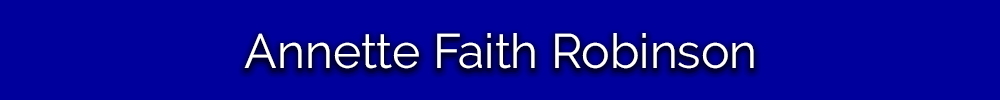
<style>
.page{position:relative;width:1000px;height:100px;background:#00009c}
.page>*{position:absolute;margin:0}
.t1{font:48px "Raleway";color:#ffffff}
</style>
<div class="page">
<p class="t1" style="left:244px;top:33px;width:510px;height:36px">Annette Faith Robinson</p>
</div>
